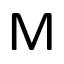
<style>
.page{position:relative;width:64px;height:64px;background:#ffffff}
.page>*{position:absolute;margin:0}
.t1{font:58.3px "Calibri";color:#000000}
</style>
<div class="page">
<p class="t1" style="left:11px;top:13px;width:41px;height:37px">М</p>
</div>
